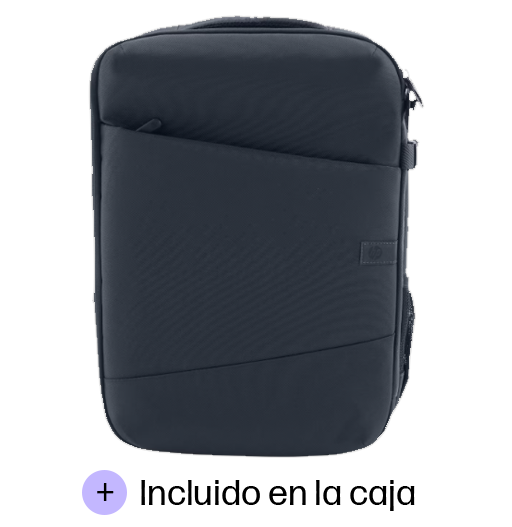
<style>
.page{position:relative;width:512px;height:527px;background:#ffffff}
.page>*{position:absolute;margin:0}
.t1{font:36px "FormaDJRMicro-Regular";color:#000000}
</style>
<div class="page">
<p class="t1" style="left:97px;top:483px;width:17px;height:18px">+</p>
<p class="t1" style="left:141px;top:480px;width:274px;height:31px">Incluido en la caja</p>
</div>
